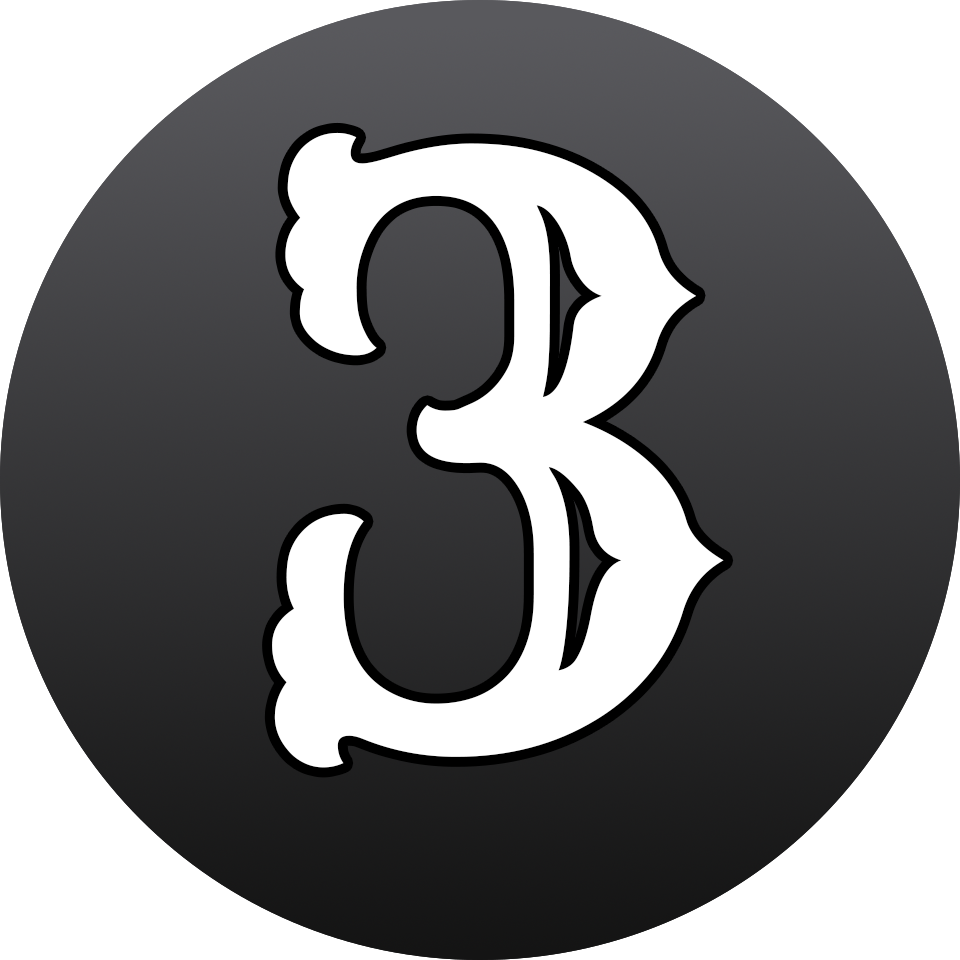
<style>
.page{position:relative;width:960px;height:960px;background:#ffffff}
.page>*{position:absolute;margin:0}
.t1{font:800px "Rye-Regular";color:#ffffff}
</style>
<div class="page">
<p class="t1" style="left:272px;top:132px;width:452px;height:636px">3</p>
</div>
